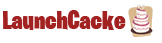
<style>
.page{position:relative;width:162px;height:43px;background:#ffffff}
.page>*{position:absolute;margin:0}
.t1{font:26px "BurbankBigCondensed-Black";color:#a22222}
</style>
<div class="page">
<p class="t1" style="left:3px;top:10px;width:123px;height:20px">LaunchCacke</p>
</div>
